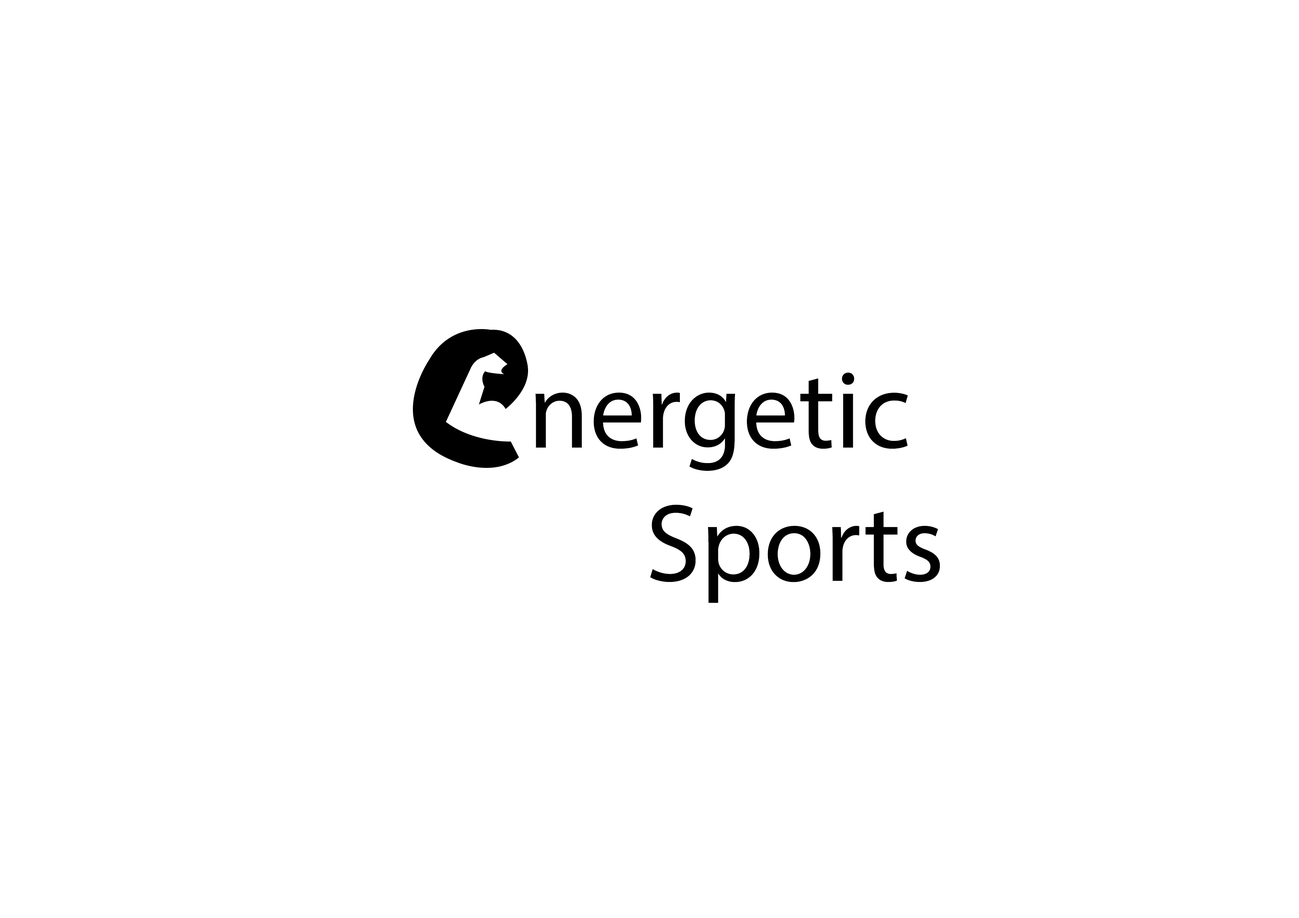
<style>
.page{position:relative;width:1299px;height:918px;background:#ffffff}
.page>*{position:absolute;margin:0}
.t1{font:111.1px "MyriadPro-Regular";color:#000000}
</style>
<div class="page">
<p class="t1" style="left:535px;top:372px;width:405px;height:231px">nergetic <br>     Sports</p>
</div>
